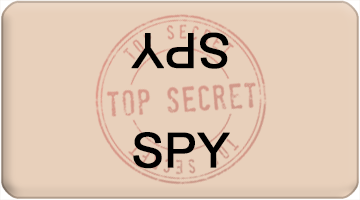
<style>
.page{position:relative;width:360px;height:200px;background:#e8d0bb}
.page>*{position:absolute;margin:0}
.t1{font:48px "ArialMT";color:#000000;font-weight:bold}
</style>
<div class="page">
<p class="t1" style="left:131px;top:32px;width:98px;height:37px;rotate:180deg">SPY</p>
<p class="t1" style="left:133px;top:132px;width:97px;height:37px">SPY</p>
</div>
